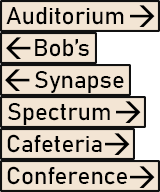
<style>
.page{position:relative;width:160px;height:192px;background:#f3e5d4}
.page>*{position:absolute;margin:0}
.t1{font:24px "Bahnschrift";color:#000000}
</style>
<div class="page">
<p class="t1" style="left:6px;top:7px;width:118px;height:18px">Auditorium</p>
<p class="t1" style="left:35px;top:39px;width:54px;height:18px">Bob’s</p>
<p class="t1" style="left:35px;top:71px;width:89px;height:22px">Synapse</p>
<p class="t1" style="left:8px;top:103px;width:102px;height:22px">Spectrum</p>
<p class="t1" style="left:7px;top:134px;width:95px;height:19px">Cafeteria</p>
<p class="t1" style="left:7px;top:166px;width:120px;height:19px">Conference</p>
</div>
